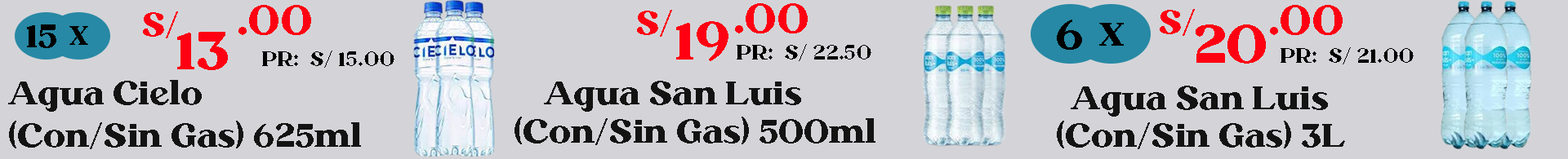
<style>
.page{position:relative;width:1568px;height:159px;background:#d4d4d8}
.page>*{position:absolute;margin:0}
.t1{font:40.8px "Megusto-Regular";color:#ff0012}
.t2{font:32.7px "Megusto-Regular";color:#ff0012}
.t3{font:32.4px "Megusto-Regular";color:#010100}
.t4{font:25.9px "Megusto-Regular";color:#000000}
.t5{font:53.1px "Megusto-Regular";color:#ff0012}
.t6{font:40.8px "Megusto-Regular";color:#010100}
.t7{font:32.7px "Megusto-Regular";color:#000000}
.t8{font:20.4px "Megusto-Regular";color:#000000}
.t9{font:32.7px "Megusto-Regular";color:#131313}
</style>
<div class="page">
<p class="t1" style="left:238px;top:5px;width:73px;height:30px">.00</p>
<p class="t1" style="left:735px;top:3px;width:73px;height:30px">.00</p>
<p class="t1" style="left:1270px;top:5px;width:73px;height:30px">.00</p>
<p class="t2" style="left:143px;top:11px;width:35px;height:27px">S/</p>
<p class="t2" style="left:637px;top:10px;width:35px;height:27px">S/</p>
<p class="t2" style="left:1160px;top:9px;width:35px;height:27px">S/</p>
<p class="t3" style="left:27px;top:24px;width:29px;height:24px">15</p>
<p class="t4" style="left:69px;top:26px;width:19px;height:19px">X</p>
<p class="t5" style="left:676px;top:21px;width:52px;height:40px">19</p>
<p class="t6" style="left:1057px;top:20px;width:25px;height:30px">6</p>
<p class="t7" style="left:1099px;top:23px;width:25px;height:23px">X</p>
<p class="t5" style="left:1196px;top:24px;width:70px;height:40px">20</p>
<p class="t5" style="left:177px;top:32px;width:51px;height:38px">13</p>
<p class="t8" style="left:262px;top:51px;width:132px;height:17px">PR:  S/ 15.00</p>
<p class="t8" style="left:737px;top:44px;width:134px;height:17px">PR:  S/ 22.50</p>
<p class="t8" style="left:1281px;top:47px;width:133px;height:18px">PR:  S/ 21.00</p>
<p class="t9" style="left:8px;top:80px;width:194px;height:32px">Agua Cielo</p>
<p class="t9" style="left:544px;top:81px;width:257px;height:31px">Agua San Luis</p>
<p class="t9" style="left:1071px;top:86px;width:257px;height:31px">Agua San Luis</p>
<p class="t9" style="left:9px;top:121px;width:352px;height:28px">(Con/Sin Gas) 625ml</p>
<p class="t9" style="left:514px;top:117px;width:361px;height:28px">(Con/Sin Gas) 500ml</p>
<p class="t9" style="left:1057px;top:121px;width:288px;height:28px">(Con/Sin Gas) 3L</p>
</div>
